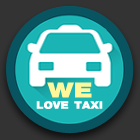
<style>
.page{position:relative;width:140px;height:140px;background:#333333}
.page>*{position:absolute;margin:0}
.t1{font:31.1px "PSLEmpireExtraADBold";color:#fff799;scale:1.34 1}
.t2{font:15.5px "PSLEmpireExtraADBold";color:#ffffff;scale:1.16 1}
</style>
<div class="page">
<p class="t1" style="left:47px;top:82px;width:45px;height:16px">WE</p>
<p class="t2" style="left:36px;top:101px;width:67px;height:8px">LOVE TAXI</p>
</div>
